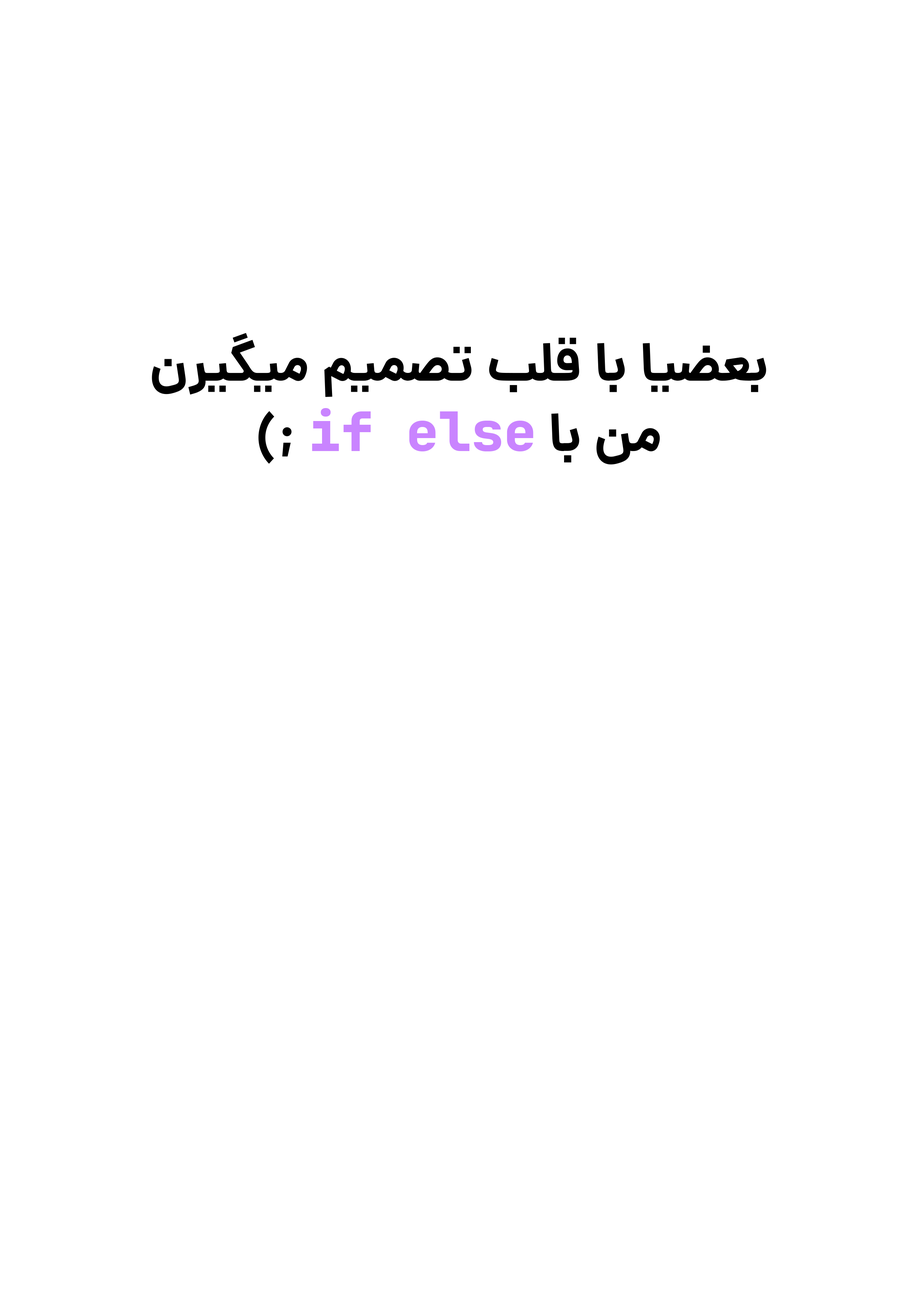
<style>
.page{position:relative;width:918px;height:1299px;background:#ffffff}
.page>*{position:absolute;margin:0}
.t1{font:54.2px/70.4px "Dana-Bold";color:#000000}
.t2{font:54.2px/70.4px "JetBrainsMono-ExtraBold";color:#c984ff}
</style>
<div class="page">
<p class="t1" style="left:152px;top:333px;width:614px;height:132px;text-align:center">بعضیا با قلب تصمیم میگیرن<br>من با <span class="t2">if else </span>;)</p>
</div>
